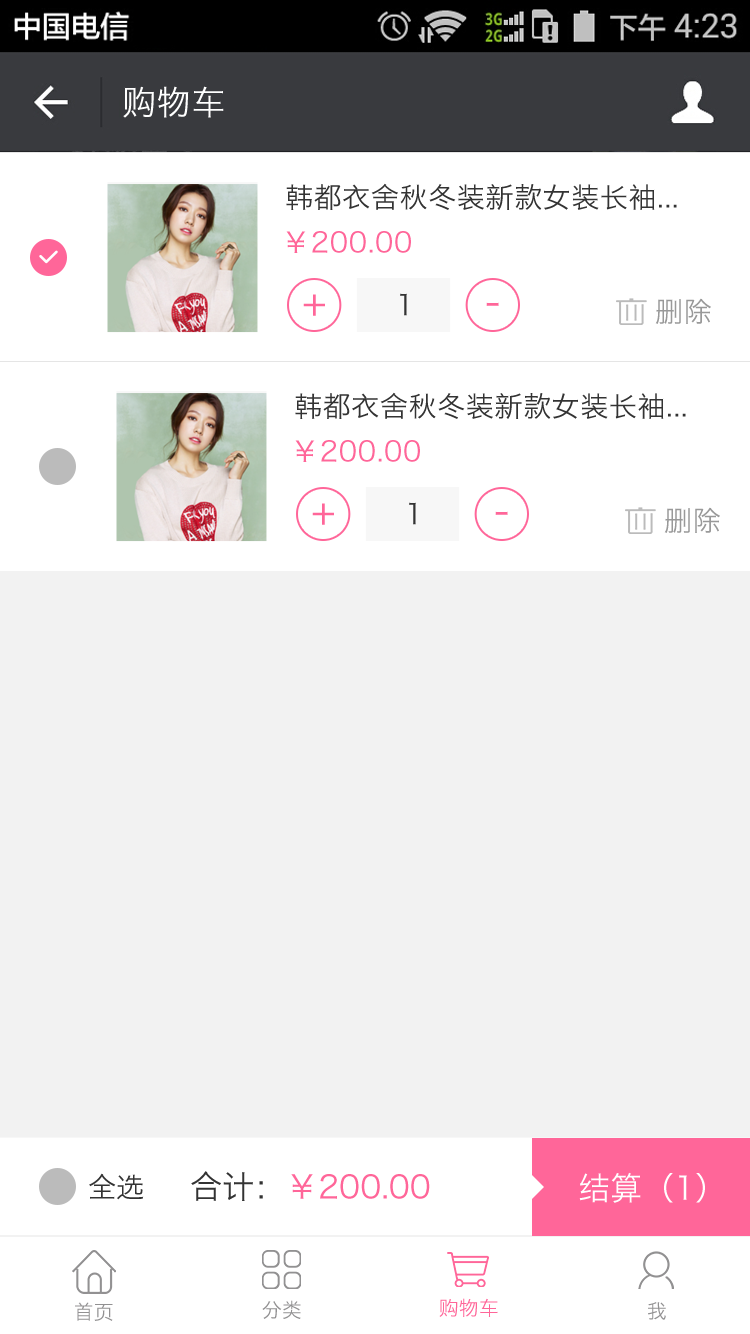
<style>
.page{position:relative;width:750px;height:1334px;background:#f2f2f2}
.page>*{position:absolute;margin:0}
.t1{font:34px "HiraginoSansGB-W3";letter-spacing:0.022em;color:#ffffff}
.t2{font:28px "HiraginoSansGB-W3";letter-spacing:0.022em;color:#333333}
.t3{font:28px "HiraginoSansGB-W3";letter-spacing:0.022em;color:#ff6699}
.t4{font:28px "HiraginoSansGB-W3";color:#333333}
.t5{font:38.6px "HiraginoSansGB-W3";color:#ff6699}
.t6{font:28px "HiraginoSansGB-W3";letter-spacing:0.02em;color:#999999}
.t7{font:32px "HiraginoSansGB-W3";color:#ff6699}
.t8{font:32px "HiraginoSansGB-W3";color:#333333}
.t9{font:32px "HiraginoSansGB-W3";color:#ffffff}
.t10{font:20px "HiraginoSansGB-W3";color:#929192}
.t11{font:20px "HiraginoSansGB-W3";color:#ff6699}
</style>
<div class="page">
<p class="t1" style="left:123px;top:86px;width:101px;height:32px">购物车</p>
<p class="t2" style="left:286px;top:183px;width:391px;height:27px">韩都衣舍秋冬装新款女装长袖...</p>
<p class="t3" style="left:286px;top:231px;width:125px;height:22px">￥200.00</p>
<p class="t4" style="left:400px;top:293px;width:7px;height:23px">1</p>
<p class="t5" style="left:486px;top:302px;width:13px;height:4px">-</p>
<p class="t6" style="left:655px;top:298px;width:56px;height:26px">删除</p>
<p class="t2" style="left:295px;top:392px;width:391px;height:27px">韩都衣舍秋冬装新款女装长袖...</p>
<p class="t3" style="left:295px;top:440px;width:125px;height:22px">￥200.00</p>
<p class="t5" style="left:312px;top:503px;width:22px;height:22px">+</p>
<p class="t4" style="left:409px;top:502px;width:7px;height:23px">1</p>
<p class="t6" style="left:664px;top:507px;width:56px;height:26px">删除</p>
<p class="t4" style="left:89px;top:1173px;width:55px;height:27px">全选</p>
<p class="t7" style="left:191px;top:1171px;width:239px;height:30px"><span class="t8">合计：</span>￥200.00</p>
<p class="t9" style="left:579px;top:1172px;width:126px;height:31px">结算（1）</p>
<p class="t10" style="left:75px;top:1302px;width:38px;height:19px">首页</p>
<p class="t10" style="left:262px;top:1300px;width:39px;height:19px">分类</p>
<p class="t11" style="left:439px;top:1298px;width:59px;height:19px">购物车</p>
<p class="t10" style="left:648px;top:1302px;width:18px;height:18px">我</p>
</div>
